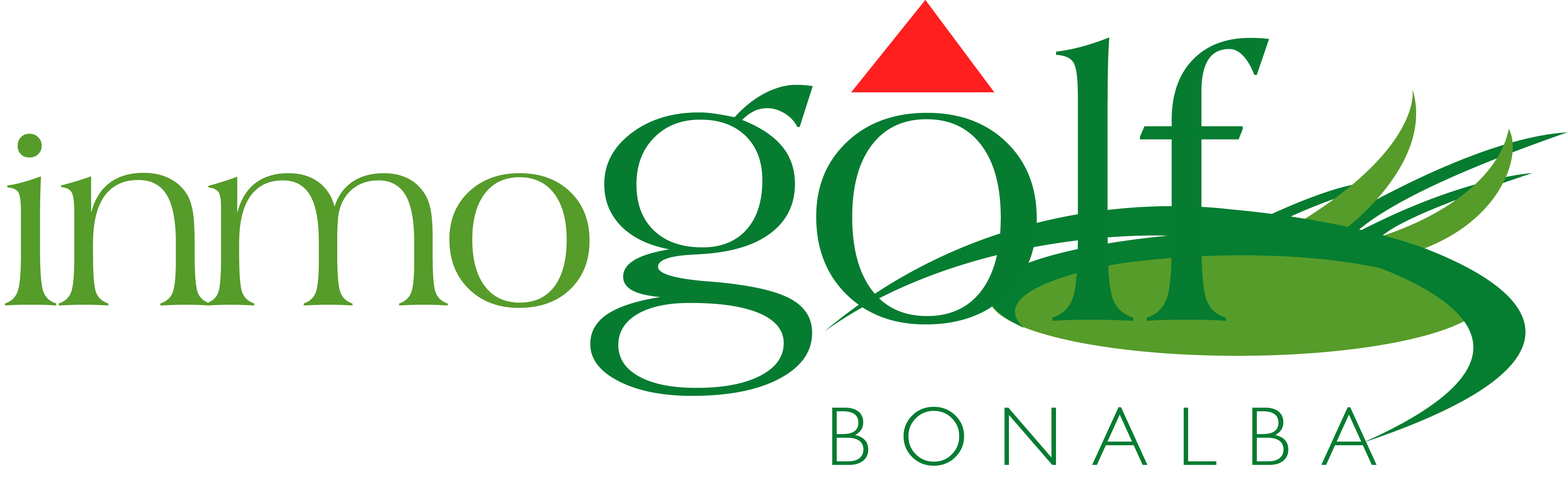
<style>
.page{position:relative;width:1568px;height:485px;background:#ffffff}
.page>*{position:absolute;margin:0}
.t1{font:386.8px "AmericanaBT-Roman";letter-spacing:-0.008em;color:#067c31}
.t2{font:386.8px "AmericanaBT-Roman";letter-spacing:-0.056em;color:#067c31}
.t3{font:386.8px "AmericanaBT-Roman";letter-spacing:-0.012em;color:#067c31}
.t4{font:246.5px "AmericanaBT-Roman";letter-spacing:-0.021em;color:#569c2a}
.t5{font:246.5px "AmericanaBT-Roman";letter-spacing:-0.045em;color:#569c2a}
.t6{font:245.8px "AmericanaBT-Roman";letter-spacing:-0.045em;color:#569c2a}
.t7{font:245.8px "AmericanaBT-Roman";color:#569c2a}
.t8{font:83.8px "GillSans-Light";letter-spacing:0.35em;color:#067c31}
</style>
<div class="page">
<p class="t1" style="left:590px;top:37px;width:679px;height:359px"><span class="t2">g</span><span class="t3">o</span>lf</p>
<p class="t4" style="left:5px;top:134px;width:585px;height:174px">i<span class="t5">n</span><span class="t6">m</span><span class="t7">o</span></p>
<p class="t8" style="left:832px;top:407px;width:545px;height:58px">BONALBA</p>
</div>
